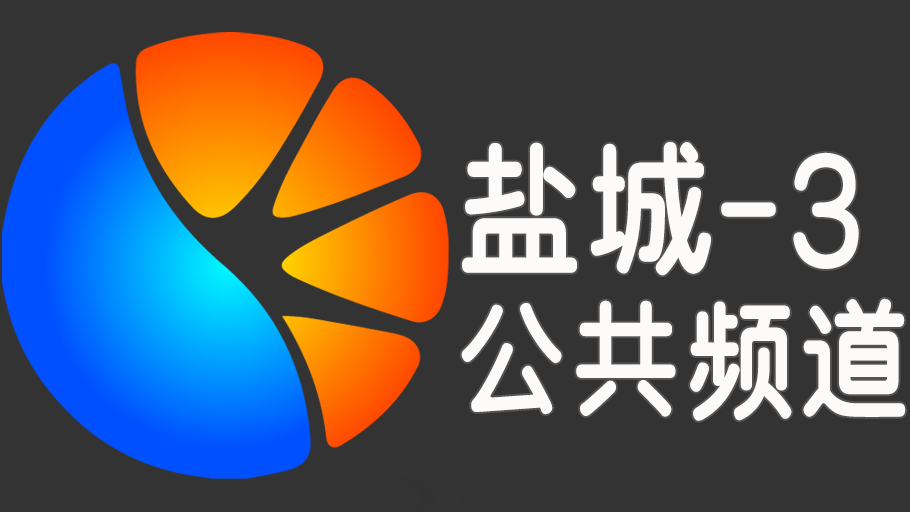
<style>
.page{position:relative;width:910px;height:512px;background:#333333}
.page>*{position:absolute;margin:0}
.t1{font:150px/160px "SJyuantijian-C-Regular";letter-spacing:0.02em;color:#fcfbf9;scale:0.85 1}
.t2{font:132px/160px "SJyuantijian-C-Regular";letter-spacing:0.02em;color:#fcfbf9;scale:0.85 1}
</style>
<div class="page">
<p class="t1" style="left:461px;top:142px;width:445px;height:279px">盐城-3<br><span class="t2">公共频道</span></p>
</div>
